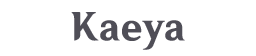
<style>
.page{position:relative;width:256px;height:56px;background:#ffffff}
.page>*{position:absolute;margin:0}
.t1{font:36px "HYWenHei-HEW";color:#4f4e57}
</style>
<div class="page">
<p class="t1" style="left:71px;top:12px;width:114px;height:38px">Kaeya</p>
</div>
